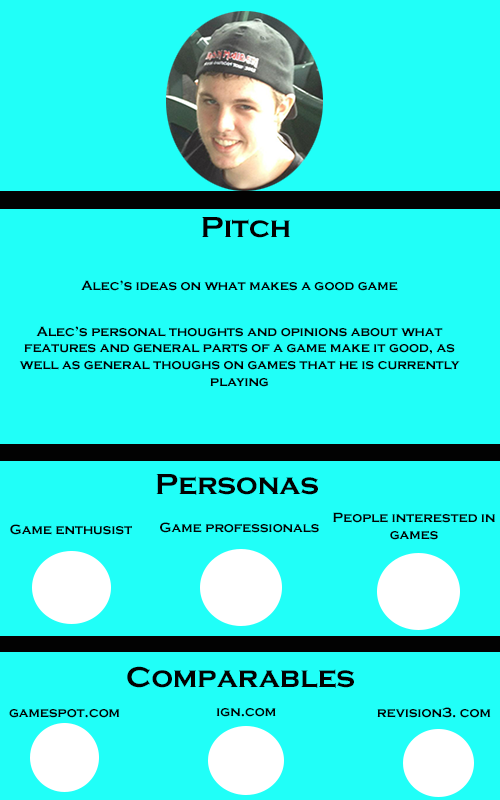
<style>
.page{position:relative;width:500px;height:800px;background:#20fff8}
.page>*{position:absolute;margin:0}
.t1{font:30px "CopperplateGothic-Bold";color:#020202}
.t2{font:14px "CopperplateGothic-Bold";color:#020202}
</style>
<div class="page">
<p class="t1" style="left:202px;top:217px;width:88px;height:21px">Pitch</p>
<p class="t2" style="left:81px;top:280px;width:317px;height:11px">Alec’s ideas on what makes a good game</p>
<p class="t2" style="left:19px;top:326px;width:441px;height:61px;text-align:center">Alec’s personal thoughts and opinions about what features and general parts of a game make it good, as well as general thoughs on games that he is currently playing</p>
<p class="t1" style="left:156px;top:474px;width:162px;height:21px">Personas</p>
<p class="t2" style="left:333px;top:512px;width:162px;height:28px;text-align:center">People interested in games</p>
<p class="t2" style="left:10px;top:524px;width:122px;height:11px">Game enthusist</p>
<p class="t2" style="left:160px;top:522px;width:159px;height:11px">Game professionals</p>
<p class="t1" style="left:127px;top:666px;width:227px;height:22px">Comparables</p>
<p class="t2" style="left:9px;top:708px;width:111px;height:10px">gamespot.com</p>
<p class="t2" style="left:216px;top:708px;width:60px;height:9px">ign.com</p>
<p class="t2" style="left:377px;top:707px;width:114px;height:11px">revision3. com</p>
</div>
